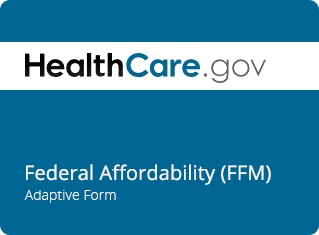
<style>
.page{position:relative;width:319px;height:235px;background:#006694}
.page>*{position:absolute;margin:0}
.t1{font:20px "OpenSans";letter-spacing:0.005em;color:#f7f7f7}
.t2{font:14px "OpenSans-Light";letter-spacing:0.005em;color:#f7f7f7}
</style>
<div class="page">
<p class="t1" style="left:26px;top:164px;width:245px;height:21px">Federal Affordability (FFM)</p>
<p class="t2" style="left:24px;top:190px;width:92px;height:13px">Adaptive Form</p>
</div>
